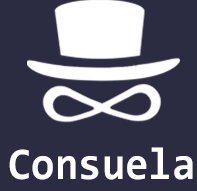
<style>
.page{position:relative;width:197px;height:191px;background:#2b2b42}
.page>*{position:absolute;margin:0}
.t1{font:45.5px "Consolas-Bold";color:#ffffff;scale:0.93 1}
</style>
<div class="page">
<p class="t1" style="left:9px;top:147px;width:184px;height:33px">Consuela</p>
</div>
